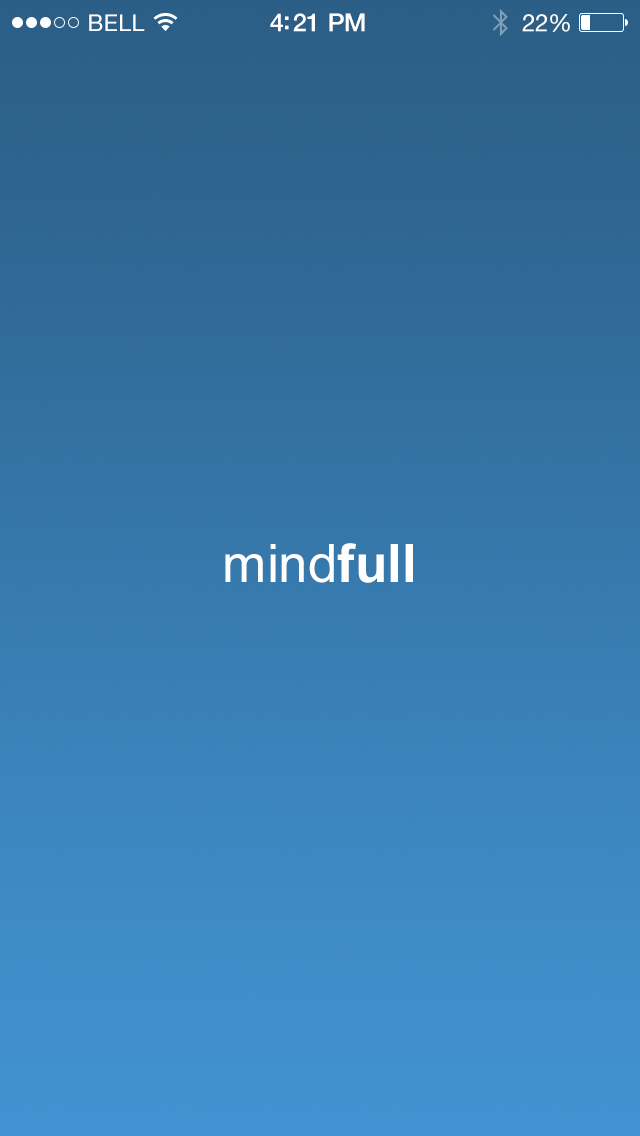
<style>
.page{position:relative;width:640px;height:1136px}
.page>*{position:absolute;margin:0}
.t1{font:23px "HelveticaNeue";letter-spacing:0.02em;color:#ffffff}
.t2{font:25px "HelveticaNeue-Medium";letter-spacing:-0.02em;color:#ffffff}
.t3{font:24px "HelveticaNeue";letter-spacing:-0.02em;color:#ffffff}
.t4{font:53px "ArialMT";color:#ffffff}
.t5{font:53px "Arial-BoldMT";color:#ffffff}
</style>
<div class="page">
<p class="t1" style="left:89px;top:14px;width:56px;height:17px">BELL</p>
<p class="t2" style="left:270px;top:13px;width:95px;height:19px">4:21 PM</p>
<p class="t3" style="left:522px;top:14px;width:48px;height:18px">22%</p>
<p class="t4" style="left:225px;top:543px;width:188px;height:40px">mind<span class="t5">full</span></p>
</div>
